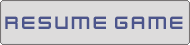
<style>
.page{position:relative;width:190px;height:45px;background:#dddcdc}
.page>*{position:absolute;margin:0}
.t1{font:20px "KenVector-Future";color:#4c558c}
</style>
<div class="page">
<p class="t1" style="left:5px;top:16px;width:178px;height:13px">Resume Game</p>
</div>
